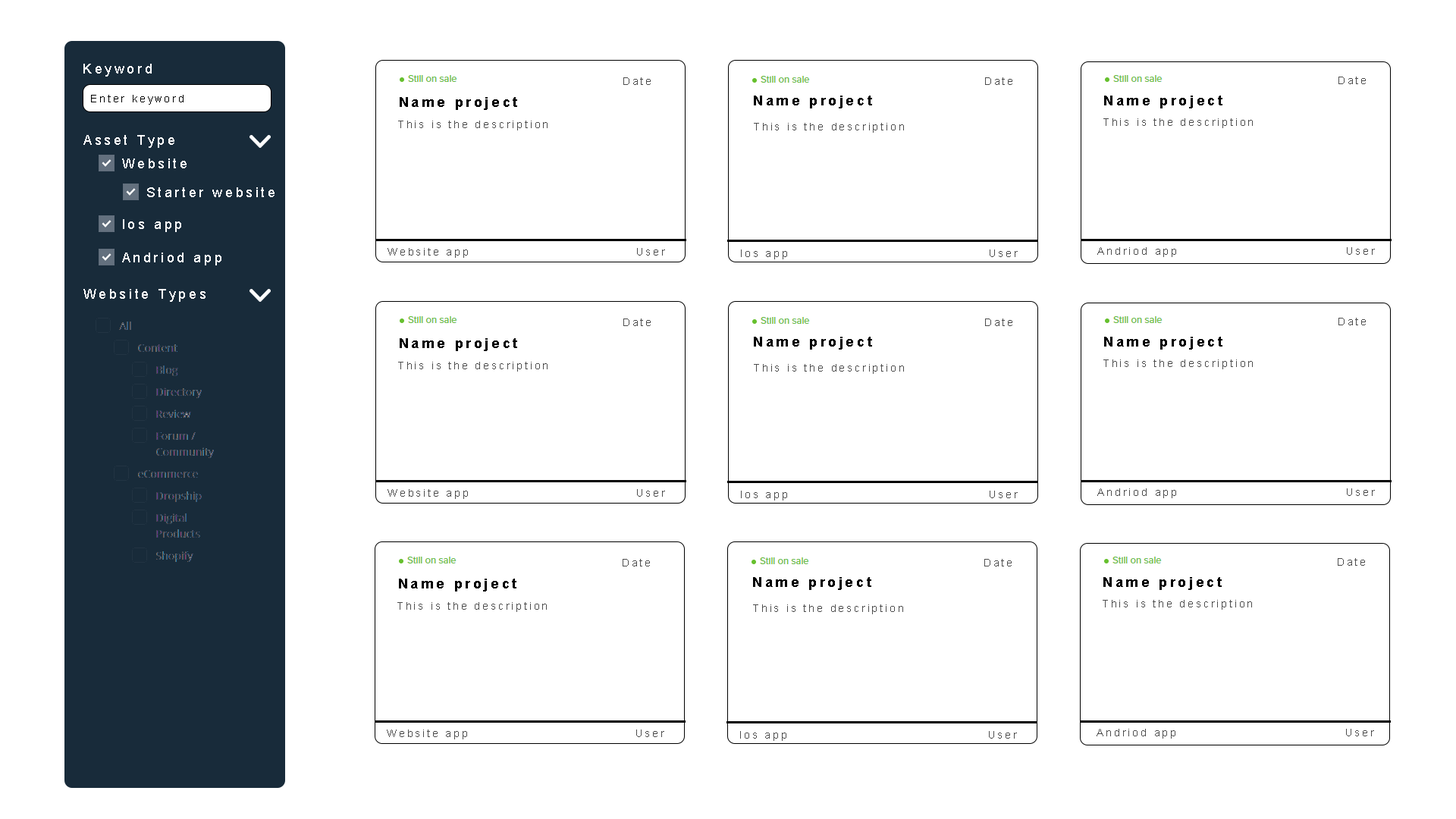
<style>
.page{position:relative;width:1456px;height:819px;background:#ffffff}
.page>*{position:absolute;margin:0}
.t1{font:13.6px "ArialMT";letter-spacing:0.2em;color:#ffffff}
.t2{font:10.6px "ArialMT";letter-spacing:0.2em;color:#4d4d4d}
.t3{font:10.6px "ArialMT";letter-spacing:0.2em;color:#000000}
.t4{font:13.6px "Arial-BoldMT";letter-spacing:0.2em;color:#000000}
</style>
<div class="page">
<p class="t1" style="left:83px;top:64px;width:69px;height:13px">Keyword</p>
<p class="t2" style="left:623px;top:77px;width:28px;height:8px">Date</p>
<p class="t2" style="left:985px;top:77px;width:27px;height:8px">Date</p>
<p class="t2" style="left:1338px;top:77px;width:28px;height:7px">Date</p>
<p class="t3" style="left:91px;top:95px;width:93px;height:10px">Enter keyword</p>
<p class="t4" style="left:400px;top:97px;width:117px;height:13px">Name project</p>
<p class="t4" style="left:754px;top:96px;width:118px;height:12px">Name project</p>
<p class="t4" style="left:1104px;top:96px;width:118px;height:12px">Name project</p>
<p class="t2" style="left:398px;top:121px;width:150px;height:9px">This is the description</p>
<p class="t2" style="left:754px;top:123px;width:150px;height:10px">This is the description</p>
<p class="t2" style="left:1103px;top:118px;width:150px;height:10px">This is the description</p>
<p class="t1" style="left:83px;top:135px;width:91px;height:13px">Asset Type</p>
<p class="t1" style="left:122px;top:158px;width:65px;height:10px">Website</p>
<p class="t1" style="left:147px;top:187px;width:128px;height:10px">Starter website</p>
<p class="t1" style="left:123px;top:219px;width:58px;height:13px">Ios app</p>
<p class="t1" style="left:122px;top:253px;width:99px;height:12px">Andriod app</p>
<p class="t2" style="left:388px;top:248px;width:80px;height:10px">Website app</p>
<p class="t2" style="left:637px;top:248px;width:28px;height:8px">User</p>
<p class="t2" style="left:741px;top:249px;width:46px;height:10px">Ios app</p>
<p class="t2" style="left:990px;top:249px;width:28px;height:8px">User</p>
<p class="t2" style="left:1097px;top:247px;width:79px;height:10px">Andriod app</p>
<p class="t2" style="left:1347px;top:247px;width:28px;height:8px">User</p>
<p class="t1" style="left:83px;top:289px;width:123px;height:13px">Website Types</p>
<p class="t2" style="left:1338px;top:318px;width:28px;height:7px">Date</p>
<p class="t2" style="left:623px;top:318px;width:28px;height:8px">Date</p>
<p class="t2" style="left:985px;top:318px;width:27px;height:8px">Date</p>
<p class="t4" style="left:400px;top:338px;width:117px;height:13px">Name project</p>
<p class="t4" style="left:754px;top:337px;width:118px;height:13px">Name project</p>
<p class="t4" style="left:1104px;top:337px;width:118px;height:13px">Name project</p>
<p class="t2" style="left:398px;top:362px;width:150px;height:10px">This is the description</p>
<p class="t2" style="left:754px;top:364px;width:150px;height:10px">This is the description</p>
<p class="t2" style="left:1103px;top:359px;width:150px;height:10px">This is the description</p>
<p class="t2" style="left:388px;top:489px;width:80px;height:10px">Website app</p>
<p class="t2" style="left:637px;top:489px;width:28px;height:8px">User</p>
<p class="t2" style="left:741px;top:491px;width:46px;height:9px">Ios app</p>
<p class="t2" style="left:990px;top:491px;width:28px;height:7px">User</p>
<p class="t2" style="left:1097px;top:488px;width:79px;height:10px">Andriod app</p>
<p class="t2" style="left:1347px;top:488px;width:28px;height:8px">User</p>
<p class="t2" style="left:623px;top:559px;width:27px;height:7px">Date</p>
<p class="t2" style="left:984px;top:559px;width:28px;height:7px">Date</p>
<p class="t2" style="left:1338px;top:558px;width:27px;height:8px">Date</p>
<p class="t4" style="left:399px;top:579px;width:117px;height:12px">Name project</p>
<p class="t4" style="left:753px;top:577px;width:118px;height:13px">Name project</p>
<p class="t4" style="left:1103px;top:577px;width:119px;height:13px">Name project</p>
<p class="t2" style="left:397px;top:602px;width:150px;height:10px">This is the description</p>
<p class="t2" style="left:753px;top:604px;width:150px;height:10px">This is the description</p>
<p class="t2" style="left:1103px;top:600px;width:149px;height:10px">This is the description</p>
<p class="t2" style="left:387px;top:730px;width:80px;height:9px">Website app</p>
<p class="t2" style="left:636px;top:730px;width:28px;height:7px">User</p>
<p class="t2" style="left:740px;top:731px;width:46px;height:10px">Ios app</p>
<p class="t2" style="left:989px;top:731px;width:28px;height:8px">User</p>
<p class="t2" style="left:1097px;top:729px;width:78px;height:10px">Andriod app</p>
<p class="t2" style="left:1346px;top:729px;width:28px;height:7px">User</p>
</div>
